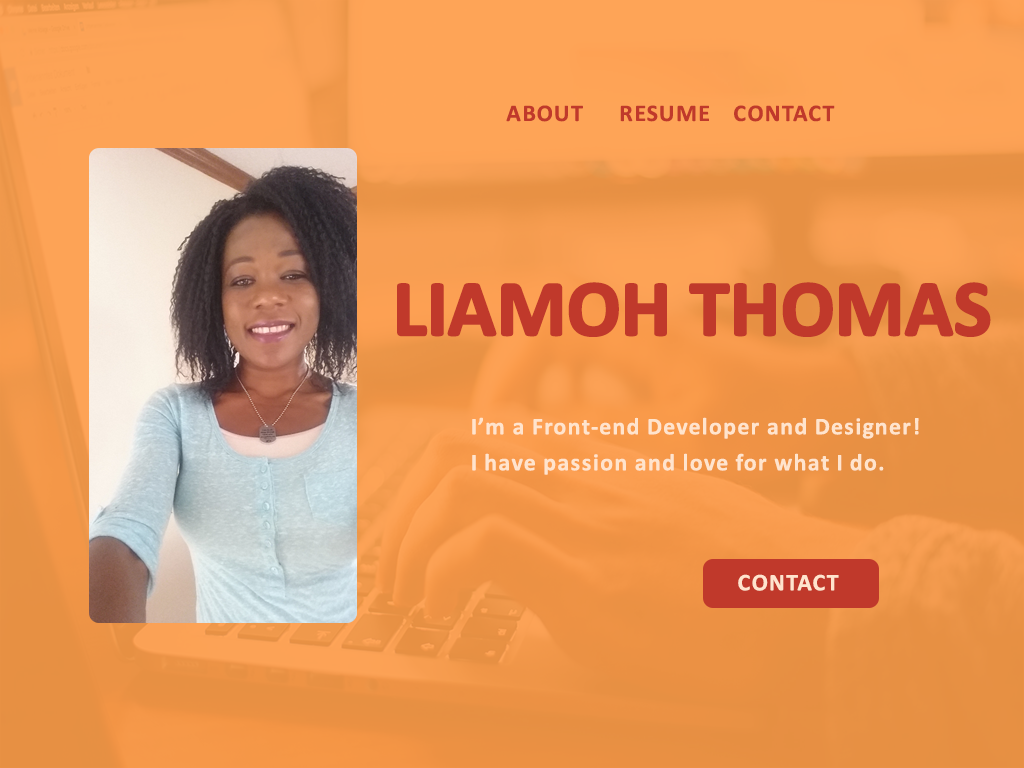
<style>
.page{position:relative;width:1024px;height:768px}
.page>*{position:absolute;margin:0}
.t1{font:24px "Calibri-Bold";letter-spacing:0.05em;color:#c0392b}
.t2{font:80px "Calibri-Bold";letter-spacing:-0.025em;color:#c0392b;font-weight:bold}
.t3{font:24px/36px "Calibri-Bold";letter-spacing:0.05em;color:#ffe4cd}
.t4{font:24px "Calibri-Bold";letter-spacing:0.05em;color:#ffe4cd}
</style>
<div class="page">
<p class="t1" style="left:506px;top:105px;width:77px;height:17px">ABOUT</p>
<p class="t1" style="left:620px;top:105px;width:89px;height:17px">RESUME</p>
<p class="t1" style="left:734px;top:105px;width:101px;height:17px">CONTACT</p>
<p class="t2" style="left:397px;top:282px;width:594px;height:55px">LIAMOH THOMAS</p>
<p class="t3" style="left:472px;top:417px;width:447px;height:58px">I’m a Front-end Developer and Designer! I have passion and love for what I do.</p>
<p class="t4" style="left:738px;top:574px;width:101px;height:17px">CONTACT</p>
</div>
